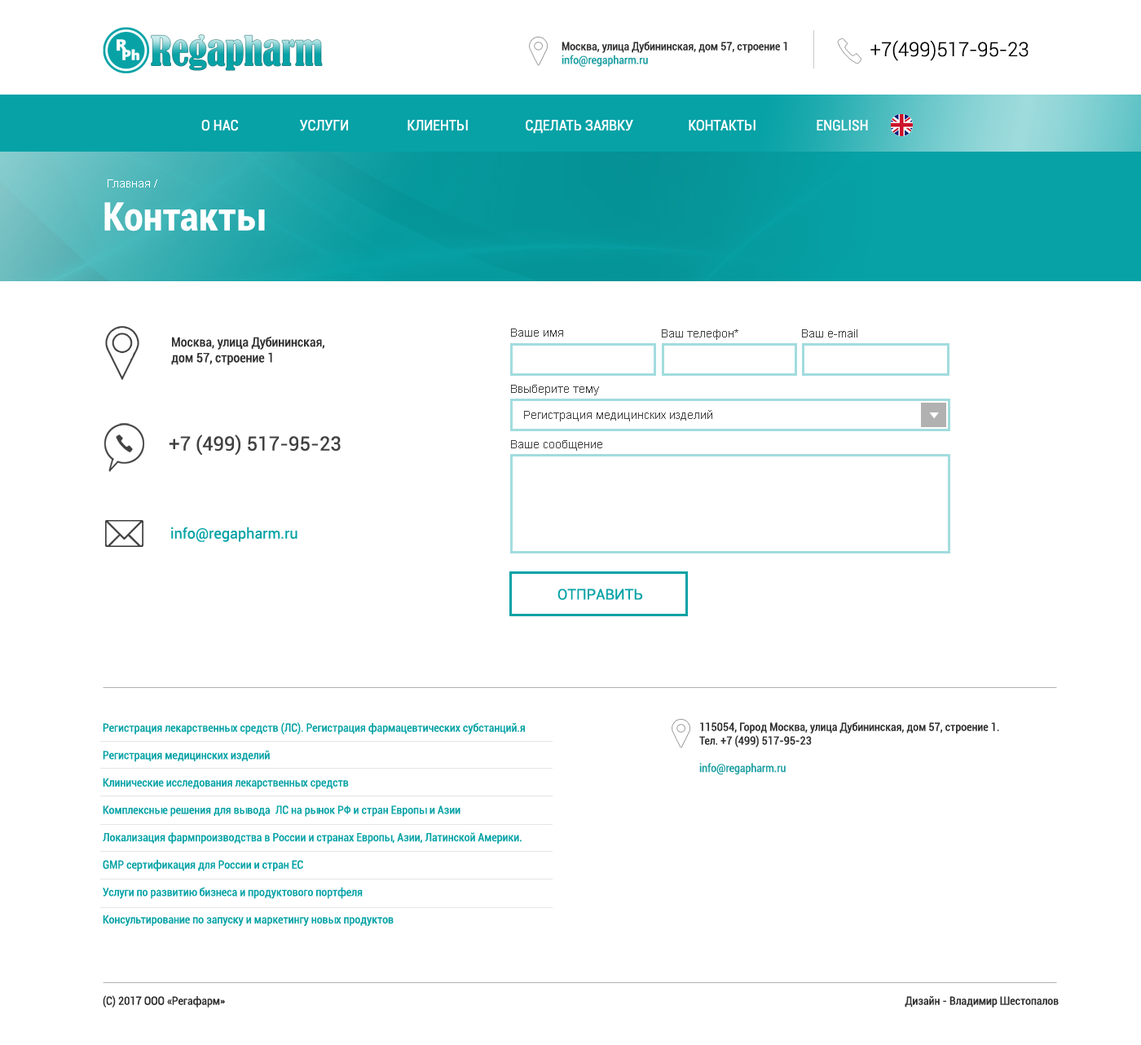
<style>
.page{position:relative;width:1141px;height:1045px;background:#ffffff}
.page>*{position:absolute;margin:0}
.t1{font:11.4px "Roboto-Condensed";color:#303030}
.t2{font:11.4px "Roboto-Condensed";color:#1e9fa3}
.t3{font:19.6px "Roboto-Light";color:#010002}
.t4{font:14.7px "Roboto-Condensed";color:#ffffff;text-transform:uppercase}
.t5{font:11.4px "ArialMT";color:#ffffff}
.t6{font:39.1px "Roboto-BoldCondensed";color:#ffffff}
.t7{font:11.4px "ArialMT";color:#414141}
.t8{font:13px "Roboto-Condensed";color:#303030}
.t9{font:19.6px "Roboto-Regular";color:#414141}
.t10{font:11.4px "Roboto-Regular";color:#414141}
.t11{font:14.7px "Roboto-Regular";color:#06a2a6}
.t12{font:11.4px "Roboto-Condensed";color:#06a2a6}
</style>
<div class="page">
<p class="t1" style="left:562px;top:42px;width:225px;height:25px">Москва, улица Дубининская, дом 57, строение 1<br><span class="t2">info@regapharm.ru</span></p>
<p class="t3" style="left:871px;top:40px;width:158px;height:21px">+7(499)517-95-23</p>
<p class="t4" style="left:201px;top:120px;width:667px;height:14px">О НАС                   Услуги                  КЛИЕНТЫ                  СДЕЛАТЬ ЗАЯВКУ                 КОНТАКТЫ                   ENGLISH</p>
<p class="t5" style="left:108px;top:179px;width:49px;height:8px">Главная /</p>
<p class="t6" style="left:104px;top:202px;width:161px;height:29px">Контакты</p>
<p class="t7" style="left:511px;top:328px;width:52px;height:9px">Ваше имя</p>
<p class="t7" style="left:662px;top:329px;width:76px;height:11px">Ваш телефон*</p>
<p class="t7" style="left:802px;top:329px;width:55px;height:8px">Ваш e-mail</p>
<p class="t8" style="left:171px;top:337px;width:153px;height:28px">Москва, улица Дубининская, <br>дом 57, строение 1</p>
<p class="t7" style="left:511px;top:385px;width:88px;height:10px">Ввыберите тему</p>
<p class="t7" style="left:524px;top:410px;width:188px;height:11px">Регистрация медицинских изделий</p>
<p class="t9" style="left:169px;top:434px;width:172px;height:22px"><span class="t10"><br><br><br></span>+7 (499) 517-95-23</p>
<p class="t7" style="left:511px;top:440px;width:91px;height:11px">Ваше сообщение</p>
<p class="t11" style="left:171px;top:527px;width:127px;height:15px">info@regapharm.ru</p>
<p class="t11" style="left:558px;top:588px;width:85px;height:12px">ОТПРАВИТЬ</p>
<p class="t12" style="left:103px;top:722px;width:422px;height:204px">Регистрация лекарственных средств (ЛС). Регистрация фармацевтических субстанций.я<br><br>Регистрация медицинских изделий<br><br>Клинические исследования лекарственных средств<br><br>Комплексные решения для вывода  ЛС на рынок РФ и стран Европы и Азии<br><br>Локализация фармпроизводства в России и странах Европы, Азии, Латинской Америки.<br><br>GMP сертификация для России и стран ЕС<br><br>Услуги по развитию бизнеса и продуктового портфеля<br><br>Консультирование по запуску и маркетингу новых продуктов</p>
<p class="t1" style="left:699px;top:722px;width:300px;height:53px">115054, Город Москва, улица Дубининская, дом 57, строение 1.<br>Тел. +7 (499) 517-95-23<br><span class="t2"><br>info@regapharm.ru</span></p>
<p class="t1" style="left:103px;top:995px;width:122px;height:12px">(C) 2017 ООО «Регафарм»</p>
<p class="t1" style="left:905px;top:996px;width:154px;height:11px">Дизайн - Владимир Шестопалов</p>
</div>
